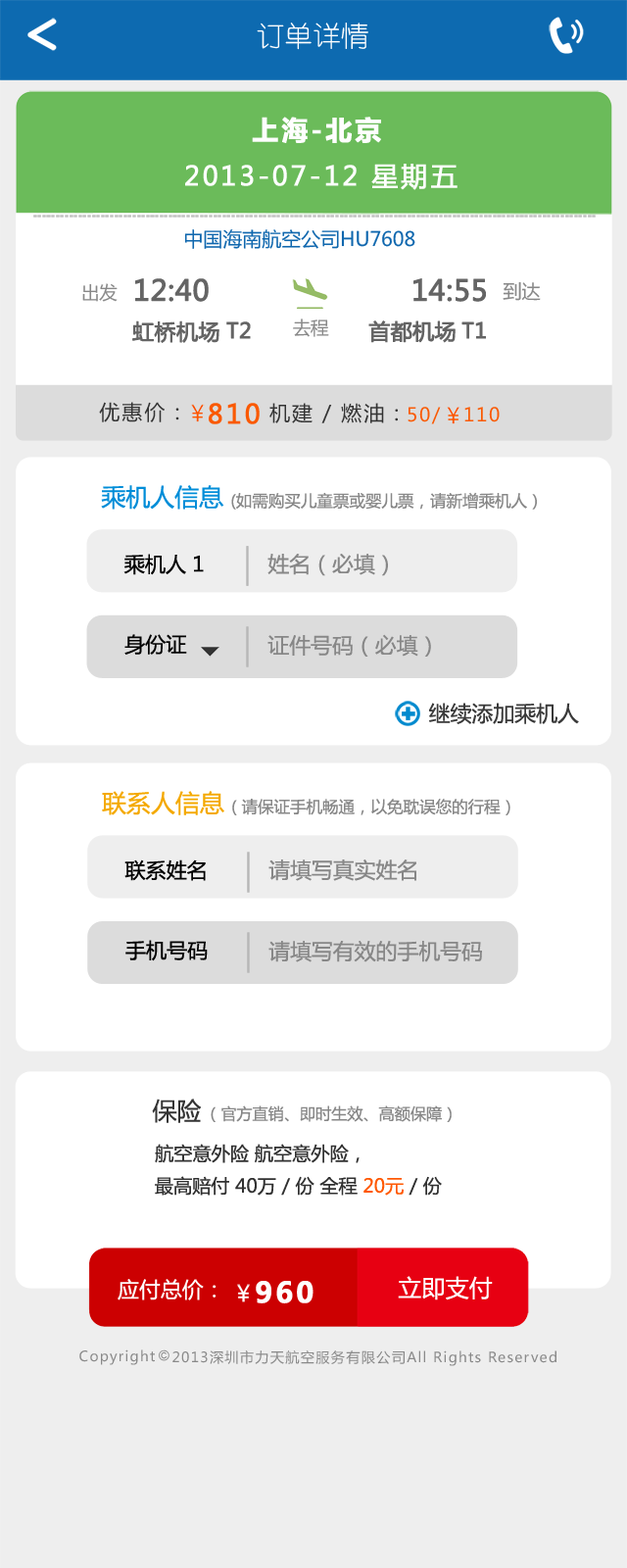
<style>
.page{position:relative;width:627px;height:1568px;background:#ffffff}
.page>*{position:absolute;margin:0}
.t1{font:28.2px "YouYuan";color:#ffffff}
.t2{font:26.3px "MicrosoftYaHei-Bold";letter-spacing:0.09em;color:#fefefe;font-weight:bold}
.t3{font:26.3px "MicrosoftYaHei";letter-spacing:0.09em;color:#fefefe;font-weight:bold}
.t4{font:19.6px "MicrosoftYaHei";color:#0f67ae}
.t5{font:28.2px "MicrosoftYaHei";color:#646464;font-weight:bold}
.t6{font:18.8px "MicrosoftYaHei";color:#888888}
.t7{font:18.1px "MicrosoftYaHei";color:#888888}
.t8{font:21.4px "MicrosoftYaHei";color:#646464;font-weight:bold}
.t9{font:21.1px "MicrosoftYaHei";color:#646464;font-weight:bold}
.t10{font:20.7px "MicrosoftYaHei";letter-spacing:0.09em;color:#333333}
.t11{font:26.3px "MicrosoftYaHei";letter-spacing:0.09em;color:#fa5901;font-weight:bold}
.t12{font:18.8px "MicrosoftYaHei";letter-spacing:0.09em;color:#fa5901}
.t13{font:24.5px "MicrosoftYaHei";color:#008dd8}
.t14{font:16.2px "MicrosoftYaHei";color:#888888}
.t15{font:20.7px "MicrosoftYaHei";color:#010101}
.t16{font:21.4px "MicrosoftYaHei";color:#878787}
.t17{font:21.4px "MicrosoftYaHei";color:#393939}
.t18{font:24.5px "MicrosoftYaHei";color:#f4a900}
.t19{font:24.5px "MicrosoftYaHei";color:#343434}
.t20{font:15.8px "MicrosoftYaHei";color:#878787}
.t21{font:18.8px "MicrosoftYaHei";color:#313131}
.t22{font:18.8px "MicrosoftYaHei";color:#ff5800}
.t23{font:23.7px "MicrosoftYaHei";color:#fefefe}
.t24{font:21.4px "MicrosoftYaHei";color:#fefefe}
.t25{font:28.2px "MicrosoftYaHei-Bold";letter-spacing:0.09em;color:#fefefe;font-weight:bold}
.t26{font:13.9px "MicrosoftYaHei";letter-spacing:0.09em;color:#898989}
</style>
<div class="page">
<p class="t1" style="left:257px;top:23px;width:111px;height:27px">订单详情</p>
<p class="t2" style="left:252px;top:117px;width:129px;height:26px">上海-北京</p>
<p class="t3" style="left:185px;top:164px;width:273px;height:26px">2013-07-12 星期五</p>
<p class="t4" style="left:184px;top:229px;width:232px;height:20px">中国海南航空公司HU7608</p>
<p class="t5" style="left:135px;top:278px;width:74px;height:24px">12:40</p>
<p class="t5" style="left:414px;top:278px;width:72px;height:24px">14:55</p>
<p class="t6" style="left:503px;top:281px;width:38px;height:20px">到达</p>
<p class="t7" style="left:82px;top:283px;width:36px;height:19px">出发</p>
<p class="t8" style="left:132px;top:320px;width:88px;height:23px">虹桥机场</p>
<p class="t9" style="left:226px;top:321px;width:25px;height:18px">T2</p>
<p class="t7" style="left:293px;top:318px;width:36px;height:19px">去程</p>
<p class="t8" style="left:368px;top:320px;width:88px;height:23px">首都机场</p>
<p class="t9" style="left:462px;top:321px;width:24px;height:18px">T1</p>
<p class="t10" style="left:99px;top:402px;width:80px;height:20px">优惠价：</p>
<p class="t11" style="left:209px;top:403px;width:51px;height:21px">810</p>
<p class="t10" style="left:270px;top:403px;width:128px;height:20px">机建 / 燃油：</p>
<p class="t12" style="left:408px;top:407px;width:33px;height:17px">50/</p>
<p class="t12" style="left:465px;top:407px;width:35px;height:15px">110</p>
<p class="t13" style="left:101px;top:485px;width:123px;height:25px">乘机人信息</p>
<p class="t14" style="left:231px;top:492px;width:306px;height:18px">(如需购买儿童票或婴儿票，请新增乘机人）</p>
<p class="t15" style="left:123px;top:554px;width:81px;height:21px">乘机人 1</p>
<p class="t16" style="left:268px;top:554px;width:120px;height:22px">姓名（必填）</p>
<p class="t15" style="left:124px;top:634px;width:63px;height:21px">身份证</p>
<p class="t16" style="left:268px;top:634px;width:163px;height:23px">证件号码（必填）</p>
<p class="t17" style="left:428px;top:703px;width:151px;height:21px">继续添加乘机人</p>
<p class="t18" style="left:102px;top:791px;width:122px;height:24px">联系人信息</p>
<p class="t14" style="left:232px;top:799px;width:279px;height:16px">( 请保证手机畅通，以免耽误您的行程）</p>
<p class="t15" style="left:124px;top:859px;width:82px;height:22px">联系姓名</p>
<p class="t16" style="left:269px;top:859px;width:147px;height:22px">请填写真实姓名</p>
<p class="t15" style="left:125px;top:940px;width:83px;height:21px">手机号码</p>
<p class="t16" style="left:269px;top:941px;width:213px;height:21px">请填写有效的手机号码</p>
<p class="t19" style="left:152px;top:1099px;width:50px;height:24px">保险</p>
<p class="t20" style="left:211px;top:1105px;width:241px;height:17px">（官方直销、即时生效、高额保障）</p>
<p class="t21" style="left:155px;top:1144px;width:205px;height:19px">航空意外险 航空意外险，</p>
<p class="t21" style="left:155px;top:1176px;width:287px;height:20px">最高赔付 40万 / 份 全程 <span class="t22">20元 </span>/ 份</p>
<p class="t23" style="left:398px;top:1276px;width:95px;height:24px">立即支付</p>
<p class="t24" style="left:118px;top:1279px;width:99px;height:21px">应付总价：</p>
<p class="t25" style="left:256px;top:1281px;width:58px;height:22px">960</p>
<p class="t26" style="left:79px;top:1349px;width:76px;height:16px">Copyright</p>
<p class="t26" style="left:172px;top:1350px;width:385px;height:16px">2013深圳市力天航空服务有限公司All Rights Reserved</p>
</div>
